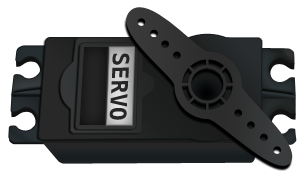
<style>
.page{position:relative;width:300px;height:177px;background:#ffffff}
.page>*{position:absolute;margin:0}
.t1{font:22.8px "Menlo-Bold";color:#262626}
</style>
<div class="page">
<p class="t1" style="left:109px;top:53px;width:21px;height:67px;rotate:93deg">SERVO</p>
</div>
